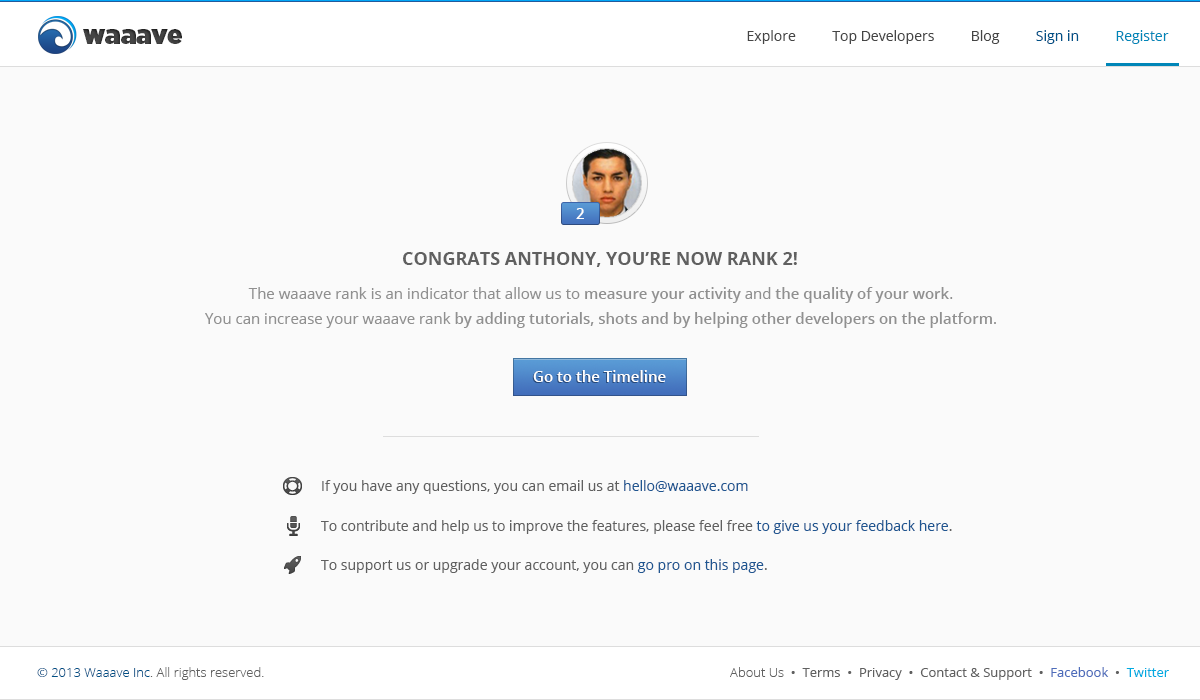
<style>
.page{position:relative;width:1200px;height:700px;background:#fafafa}
.page>*{position:absolute;margin:0}
.t1{font:25.9px "Gotham-Ultra";color:#454545}
.t2{font:14px "OpenSans";color:#454545}
.t3{font:14px "OpenSans";color:#005086}
.t4{font:14px "OpenSans";color:#0086b8}
.t5{font:15px "OpenSans-Semibold";color:#fefefe}
.t6{font:18px "OpenSans-Bold";color:#606060}
.t7{font:15px/25px "OpenSans-Semibold";color:#909090}
.t8{font:15px/25px "OpenSans";color:#909090}
.t9{font:15px "OpenSans-Semibold";color:#ffffff}
.t10{font:14px "OpenSans";color:#606060}
.t11{font:14px "OpenSans";color:#1f5691}
.t12{font:13px "OpenSans-Light";color:#606060}
.t13{font:13px "OpenSans-Light";color:#005086}
.t14{font:13px "OpenSans";color:#606060}
.t15{font:13px "OpenSans";color:#4e6dbb}
.t16{font:13px "OpenSans";color:#01abe1}
</style>
<div class="page">
<p class="t1" style="left:83px;top:29px;width:99px;height:15px">waaave</p>
<p class="t2" style="left:747px;top:30px;width:422px;height:14px">Explore          Top Developers          Blog          <span class="t3">Sign in          </span><span class="t4">Register</span></p>
<p class="t5" style="left:576px;top:208px;width:8px;height:11px">2</p>
<p class="t6" style="left:403px;top:252px;width:394px;height:15px">CONGRATS ANTHONY, YOU’RE NOW RANK 2!</p>
<p class="t7" style="left:205px;top:287px;width:791px;height:41px;text-align:center"><span class="t8">The waaave rank is an indicator that allow us to </span>measure your activity<span class="t8"> and </span>the quality of your work<span class="t8">.<br>You can increase your waaave rank </span>by adding tutorials, shots and by helping other developers on the platform<span class="t8">.</span></p>
<p class="t9" style="left:533px;top:370px;width:133px;height:12px">Go to the Timeline</p>
<p class="t10" style="left:322px;top:480px;width:426px;height:14px">If you have any questions, you can email us at <span class="t11">hello@waaave.com</span></p>
<p class="t10" style="left:321px;top:520px;width:631px;height:14px">To contribute and help us to improve the features, please feel free <span class="t11">to give us your feedback here</span>.</p>
<p class="t10" style="left:321px;top:559px;width:446px;height:14px">To support us or upgrade your account, you can <span class="t11">go pro on this page</span>.</p>
<p class="t12" style="left:37px;top:667px;width:227px;height:13px"><span class="t13">© 2013 Waaave Inc</span>. All rights reserved.</p>
<p class="t14" style="left:730px;top:667px;width:439px;height:13px"><span class="t12">About Us  </span>•  Terms  •  Privacy  •  Contact &amp; Support  •  <span class="t15">Facebook</span>  •  <span class="t16">Twitter</span></p>
</div>
